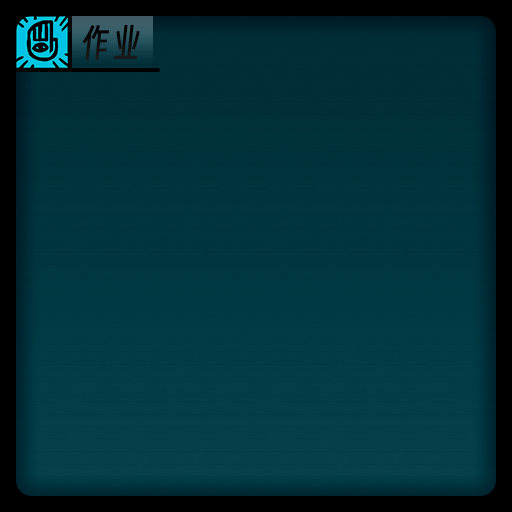
<style>
.page{position:relative;width:512px;height:512px}
.page>*{position:absolute;margin:0}
.t1{font:36px "SmileySans-Oblique";letter-spacing:0.04em;color:#000000}
</style>
<div class="page">
<p class="t1" style="left:82px;top:25px;width:58px;height:35px">作业</p>
</div>
